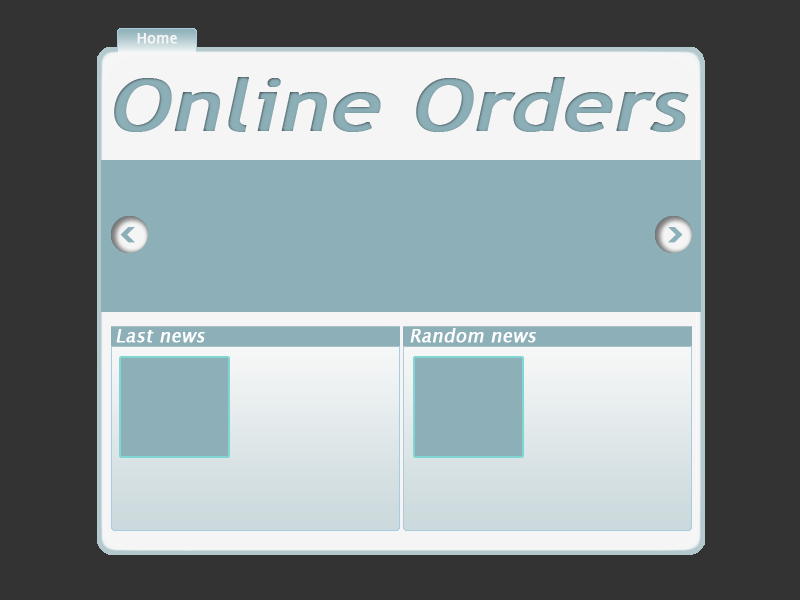
<style>
.page{position:relative;width:800px;height:600px;background:#333333}
.page>*{position:absolute;margin:0}
.t1{font:14px "LucidaSansUnicode";color:#f6f6f6;font-weight:bold}
.t2{font:72px "TrebuchetMS";color:#8db0b8;font-weight:bold;font-style:italic;scale:1.23 1}
.t3{font:18px "LucidaSansUnicode";color:#ffffff;font-weight:bold;font-style:italic}
.t4{font:18px "TrebuchetMS";color:#ffffff;font-weight:bold;font-style:italic}
</style>
<div class="page">
<p class="t1" style="left:137px;top:33px;width:40px;height:11px">Home</p>
<p class="t2" style="left:114px;top:77px;width:575px;height:55px">Online Orders</p>
<p class="t3" style="left:116px;top:329px;width:89px;height:14px"><span class="t4"> </span>Last news</p>
<p class="t3" style="left:410px;top:328px;width:126px;height:15px"><span class="t4"> </span>Random news</p>
</div>
